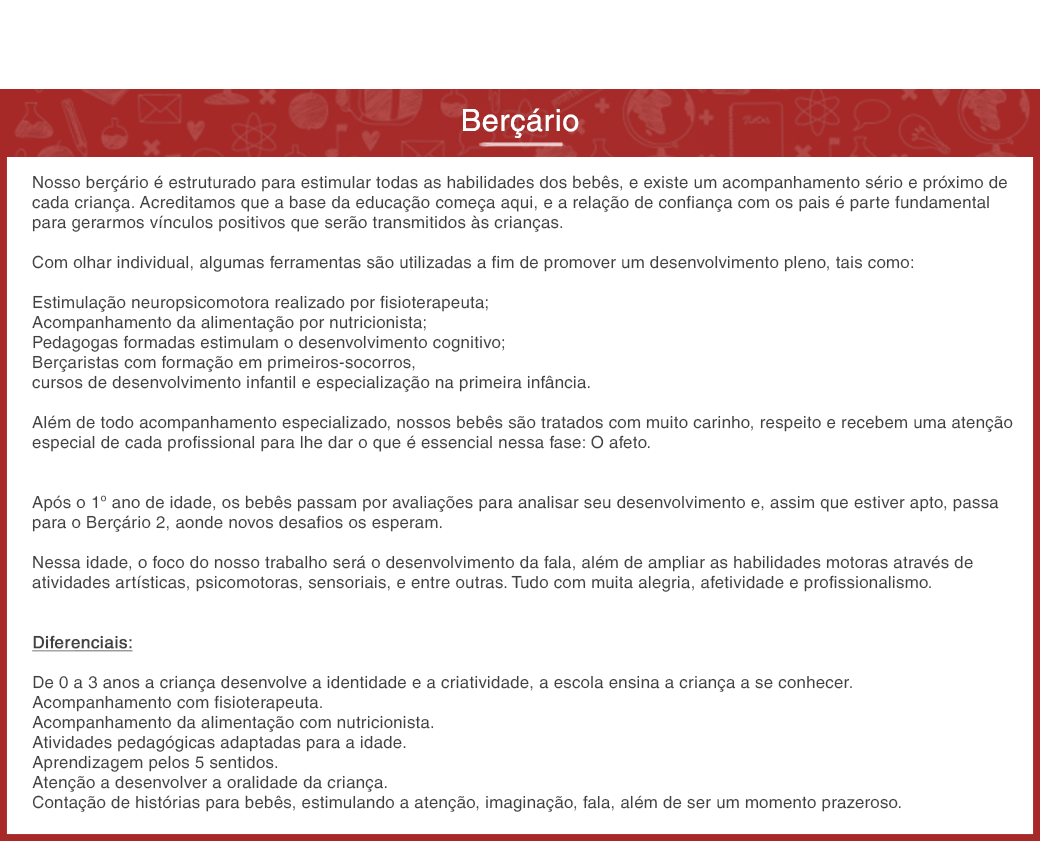
<style>
.page{position:relative;width:1040px;height:841px;background:#ffffff}
.page>*{position:absolute;margin:0}
.t1{font:30.6px "HelveticaLT";letter-spacing:0.02em;color:#ffffff}
.t2{font:16.7px "HelveticaLT";letter-spacing:0.02em;color:#414141}
.t3{font:16.7px "HelveticaLT";letter-spacing:0.02em;color:#414141;font-weight:bold;text-decoration:underline}
</style>
<div class="page">
<p class="t1" style="left:463px;top:108px;width:116px;height:30px">Berçário</p>
<p class="t2" style="left:32px;top:175px;width:981px;height:637px">Nosso berçário é estruturado para estimular todas as habilidades dos bebês, e existe um acompanhamento sério e próximo de cada criança. Acreditamos que a base da educação começa aqui, e a relação de confiança com os pais é parte fundamental para gerarmos vínculos positivos que serão transmitidos às crianças.<br><br>Com olhar individual, algumas ferramentas são utilizadas a fim de promover um desenvolvimento pleno, tais como:<br><br>Estimulação neuropsicomotora realizado por fisioterapeuta;<br>Acompanhamento da alimentação por nutricionista;<br>Pedagogas formadas estimulam o desenvolvimento cognitivo;<br>Berçaristas com formação em primeiros-socorros,<br>cursos de desenvolvimento infantil e especialização na primeira infância.<br>           <br>Além de todo acompanhamento especializado, nossos bebês são tratados com muito carinho, respeito e recebem uma atenção especial de cada profissional para lhe dar o que é essencial nessa fase: O afeto.<br><br><br>Após o 1º ano de idade, os bebês passam por avaliações para analisar seu desenvolvimento e, assim que estiver apto, passa para o Berçário 2, aonde novos desafios os esperam.<br><br>Nessa idade, o foco do nosso trabalho será o desenvolvimento da fala, além de ampliar as habilidades motoras através de atividades artísticas, psicomotoras, sensoriais, e entre outras. Tudo com muita alegria, afetividade e profissionalismo.<br><br><br><span class="t3">Diferenciais:<br><br></span>De 0 a 3 anos a criança desenvolve a identidade e a criatividade, a escola ensina a criança a se conhecer.<br>Acompanhamento com fisioterapeuta.<br>Acompanhamento da alimentação com nutricionista.<br>Atividades pedagógicas adaptadas para a idade.<br>Aprendizagem pelos 5 sentidos.<br>Atenção a desenvolver a oralidade da criança.<br>Contação de histórias para bebês, estimulando a atenção, imaginação, fala, além de ser um momento prazeroso.</p>
</div>
